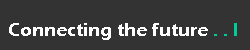
<style>
.page{position:relative;width:250px;height:50px;background:#333333}
.page>*{position:absolute;margin:0}
.t1{font:19px "ErasITC-Demi";color:#ffffff}
.t2{font:19px "ErasITC-Demi";color:#00cc99}
</style>
<div class="page">
<p class="t1" style="left:9px;top:23px;width:228px;height:17px">Connecting the future <span class="t2">. . I</span></p>
</div>
